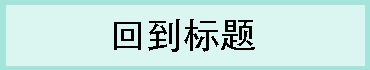
<style>
.page{position:relative;width:370px;height:70px;background:#dbf5f1}
.page>*{position:absolute;margin:0}
.t1{font:37px "AdobeHeitiStd-Regular";color:#000000}
</style>
<div class="page">
<p class="t1" style="left:114px;top:19px;width:141px;height:33px">回到标题</p>
</div>
